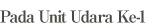
<style>
.page{position:relative;width:147px;height:27px;background:#ffffff}
.page>*{position:absolute;margin:0}
.t1{font:16.5px "RyuminPro-ExBold";letter-spacing:-0.08em;color:#4c4843}
</style>
<div class="page">
<p class="t1" style="left:0px;top:10px;width:146px;height:13px">Pada Unit Udara Ke-1</p>
</div>
